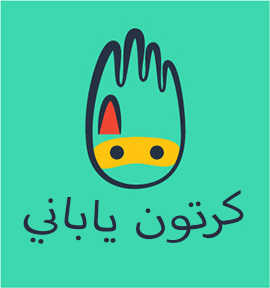
<style>
.page{position:relative;width:270px;height:288px;background:#3dd8b0}
.page>*{position:absolute;margin:0}
.t1{font:60px "MyriadArabic-Regular";color:#292a40;scale:1.13 1}
</style>
<div class="page">
<p class="t1" style="left:23px;top:189px;width:221px;height:55px">كرتون ياباني</p>
</div>
